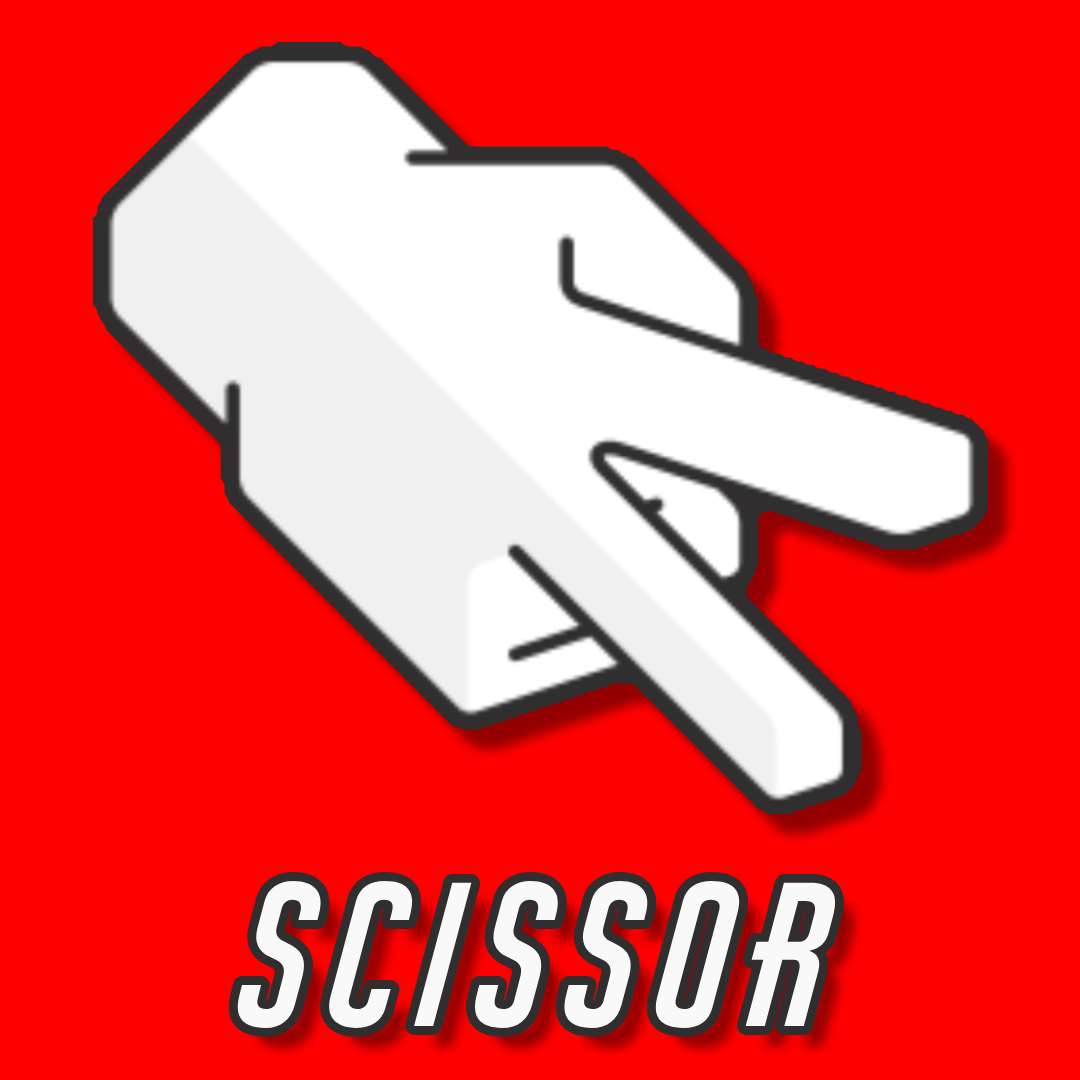
<style>
.page{position:relative;width:1080px;height:1080px;background:#ff0000}
.page>*{position:absolute;margin:0}
.t1{font:191.2px "AirAmerica-Regular";letter-spacing:0.101em;color:#f9f9f9}
</style>
<div class="page">
<p class="t1" style="left:234px;top:880px;width:605px;height:148px">scissor</p>
</div>
